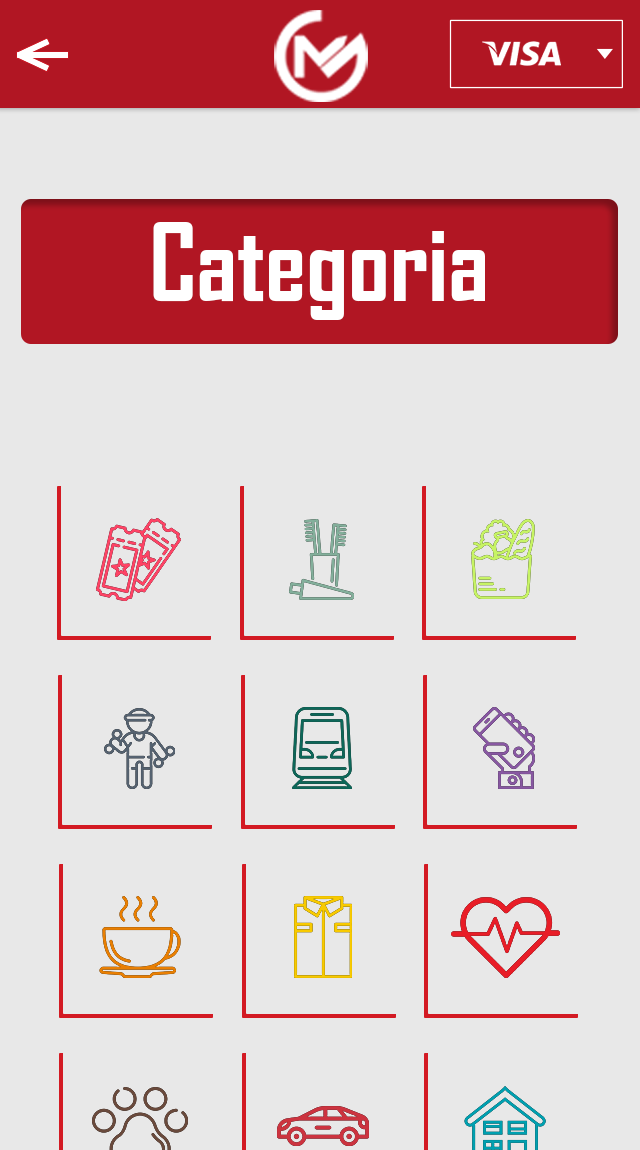
<style>
.page{position:relative;width:640px;height:1150px;background:#e8e8e8}
.page>*{position:absolute;margin:0}
.t1{font:102.5px "AgencyFB-Bold";color:#ffffff}
</style>
<div class="page">
<p class="t1" style="left:153px;top:222px;width:332px;height:98px">Categoria</p>
</div>
